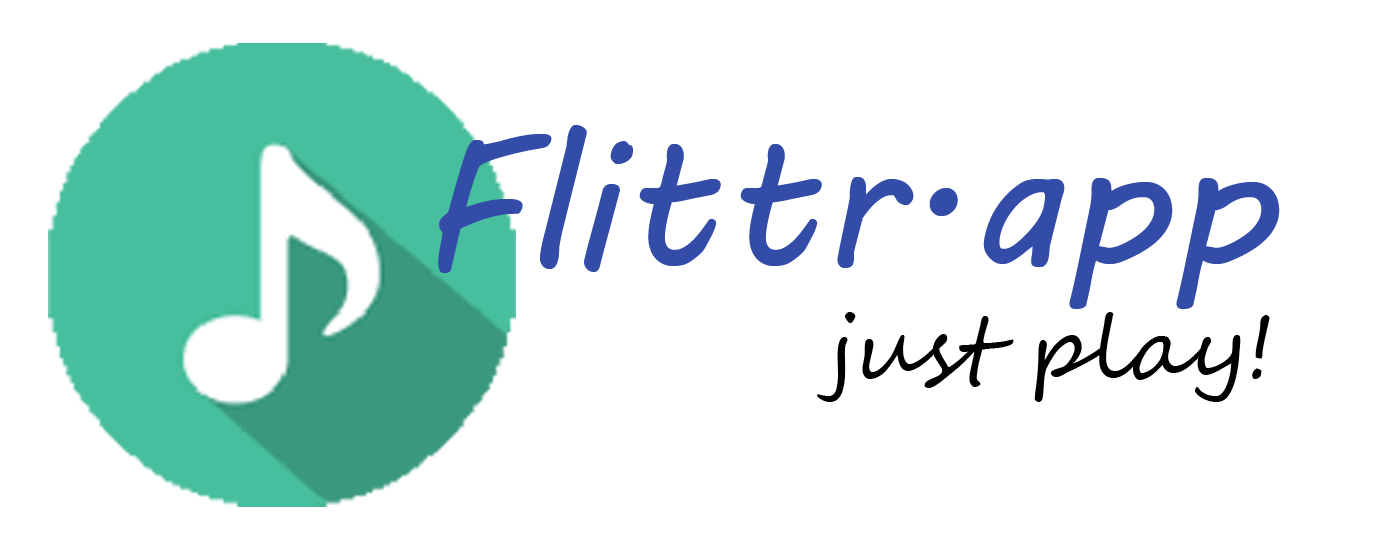
<style>
.page{position:relative;width:1400px;height:560px;background:#ffffff}
.page>*{position:absolute;margin:0}
.t1{font:190px "MVBoli";color:#334ca8}
.t2{font:90px "SegoeScript";color:#000000}
</style>
<div class="page">
<p class="t1" style="left:438px;top:124px;width:842px;height:185px">Flittr.app</p>
<p class="t2" style="left:817px;top:312px;width:453px;height:90px">just play!</p>
</div>
